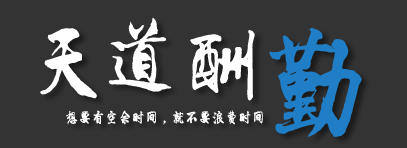
<style>
.page{position:relative;width:407px;height:148px;background:#333333}
.page>*{position:absolute;margin:0}
.t1{font:80px "LiXuKe";color:#ffffff}
.t2{font:120px "LiXuKe";color:#1f7ec5}
.t3{font:13.3px "LiXuKe";color:#ffffff}
</style>
<div class="page">
<p class="t1" style="left:108px;top:17px;width:64px;height:75px">道</p>
<p class="t1" style="left:40px;top:28px;width:57px;height:71px">天</p>
<p class="t1" style="left:190px;top:30px;width:65px;height:71px">酬</p>
<p class="t2" style="left:269px;top:28px;width:93px;height:109px">勤</p>
<p class="t3" style="left:66px;top:110px;width:197px;height:15px">想要有空余时间，就不要浪费时间</p>
</div>
